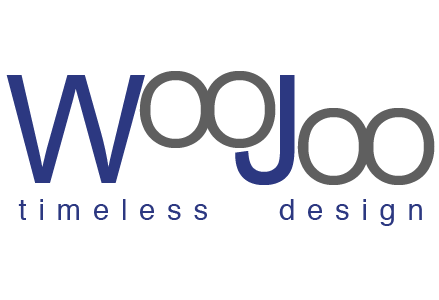
<style>
.page{position:relative;width:439px;height:300px;background:#ffffff}
.page>*{position:absolute;margin:0}
.t1{font:150.8px "ArialMT";color:#2c3881}
.t2{font:103.9px "ArialMT";letter-spacing:-0.16em;color:#5f5f5f}
.t3{font:29.3px "Helvetica";letter-spacing:0.4em;color:#2c3881}
</style>
<div class="page">
<p class="t1" style="left:6px;top:75px;width:289px;height:110px">W   J</p>
<p class="t2" style="left:139px;top:71px;width:137px;height:77px">OO</p>
<p class="t2" style="left:297px;top:108px;width:138px;height:77px">OO</p>
<p class="t3" style="left:18px;top:199px;width:404px;height:27px">timeless   design</p>
</div>
